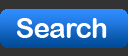
<style>
.page{position:relative;width:128px;height:56px;background:#333333}
.page>*{position:absolute;margin:0}
.t1{font:28px "ArialRoundedMTBold";letter-spacing:-0.025em;color:#ffffff}
</style>
<div class="page">
<p class="t1" style="left:17px;top:18px;width:90px;height:20px">Search</p>
</div>
